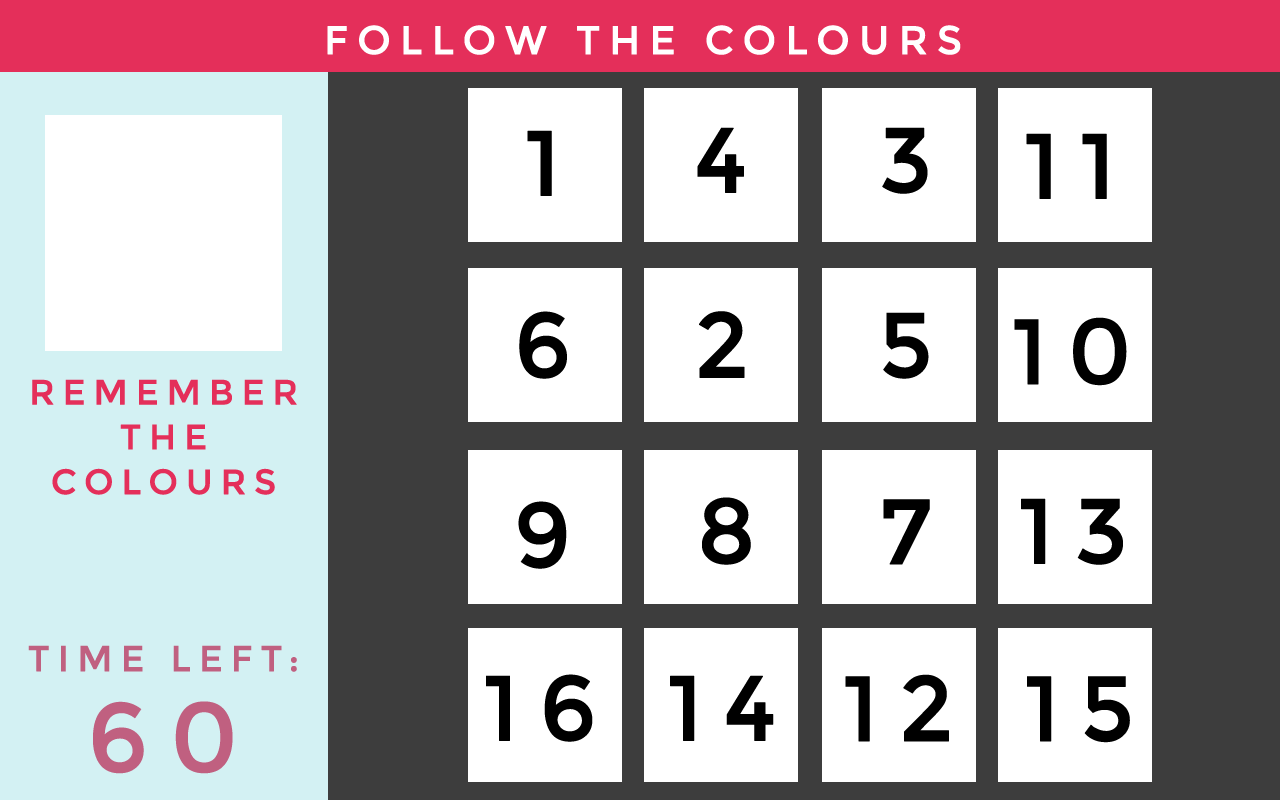
<style>
.page{position:relative;width:1280px;height:800px;background:#ffffff}
.page>*{position:absolute;margin:0}
.t1{font:40px "Montserrat-Regular";letter-spacing:0.2em;color:#ffffff;text-transform:uppercase;font-weight:bold}
.t2{font:92px "Montserrat-Regular";letter-spacing:0.2em;color:#000000;text-transform:uppercase;font-weight:bold}
.t3{font:35px/44.9px "Montserrat-Regular";letter-spacing:0.2em;color:#e42f5a;text-transform:uppercase;font-weight:bold}
.t4{font:36px/44.9px "Montserrat-Regular";letter-spacing:0.2em;color:#c06080;text-transform:uppercase;font-weight:bold}
.t5{font:98px/100.9px "Montserrat-Regular";letter-spacing:0.2em;color:#c06080;text-transform:uppercase;font-weight:bold}
</style>
<div class="page">
<p class="t1" style="left:327px;top:25px;width:634px;height:30px">Follow The Colours</p>
<p class="t2" style="left:527px;top:130px;width:25px;height:66px">1</p>
<p class="t2" style="left:697px;top:127px;width:47px;height:66px">4</p>
<p class="t2" style="left:882px;top:127px;width:46px;height:67px">3</p>
<p class="t2" style="left:1026px;top:133px;width:81px;height:66px">11</p>
<p class="t2" style="left:519px;top:311px;width:48px;height:68px">6</p>
<p class="t2" style="left:699px;top:311px;width:46px;height:67px">2</p>
<p class="t2" style="left:883px;top:312px;width:46px;height:67px">5</p>
<p class="t2" style="left:1014px;top:317px;width:113px;height:69px">10</p>
<p class="t3" style="left:32px;top:379px;width:265px;height:116px;text-align:center">Remember<br>The <br>Colours</p>
<p class="t2" style="left:702px;top:497px;width:49px;height:68px">8</p>
<p class="t2" style="left:518px;top:501px;width:49px;height:68px">9</p>
<p class="t2" style="left:883px;top:499px;width:47px;height:66px">7</p>
<p class="t2" style="left:1021px;top:498px;width:102px;height:67px">13</p>
<p class="t4" style="left:28px;top:645px;width:269px;height:129px;text-align:center">Time Left:<br><span class="t5">60</span></p>
<p class="t2" style="left:486px;top:674px;width:107px;height:68px">16</p>
<p class="t2" style="left:670px;top:675px;width:104px;height:66px">14</p>
<p class="t2" style="left:845px;top:674px;width:104px;height:68px">12</p>
<p class="t2" style="left:1027px;top:676px;width:103px;height:67px">15</p>
</div>
